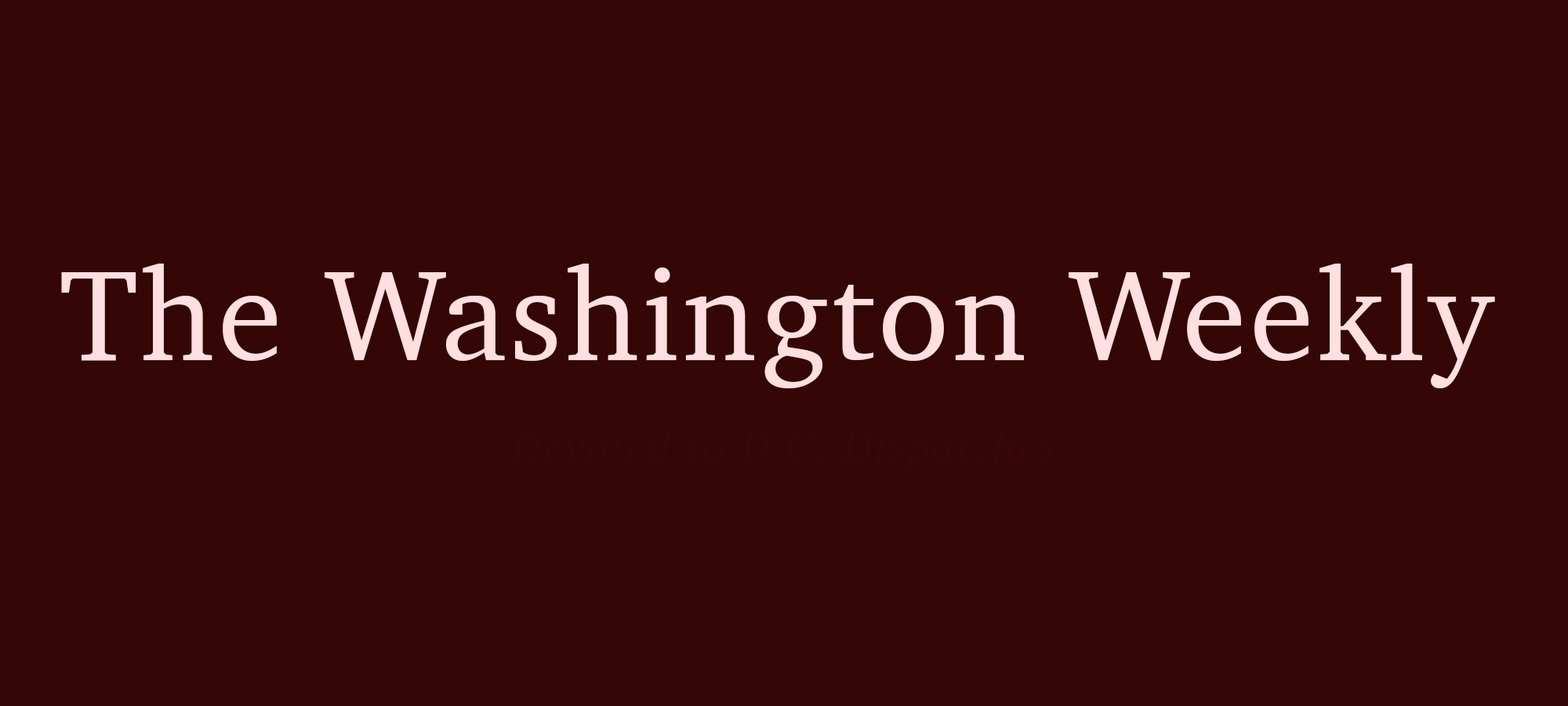
<style>
.page{position:relative;width:1568px;height:706px;background:#340606}
.page>*{position:absolute;margin:0}
.t1{font:130.6px "Charter-Roman";letter-spacing:0.025em;color:#ffdfdf}
</style>
<div class="page">
<p class="t1" style="left:61px;top:263px;width:1434px;height:125px">The Washington Weekly</p>
</div>
